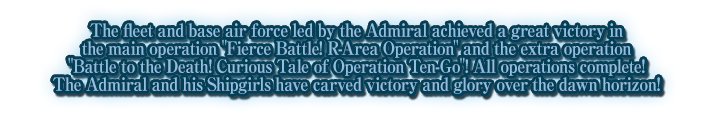
<style>
.page{position:relative;width:714px;height:116px;background:#ffffff}
.page>*{position:absolute;margin:0}
.t1{font:18px/18px "RyuminPro-ExBold";letter-spacing:-0.04em;color:#93bee0;scale:0.9 1}
</style>
<div class="page">
<p class="t1" style="left:53px;top:23px;width:607px;height:71px;text-align:center">The fleet and base air force led by the Admiral achieved a great victory in<br>the main operation "Fierce Battle! R-Area Operation" and the extra operation<br>"Battle to the Death! Curious Tale of Operation Ten-Go"! All operations complete!<br>The Admiral and his Shipgirls have carved victory and glory over the dawn horizon!</p>
</div>
